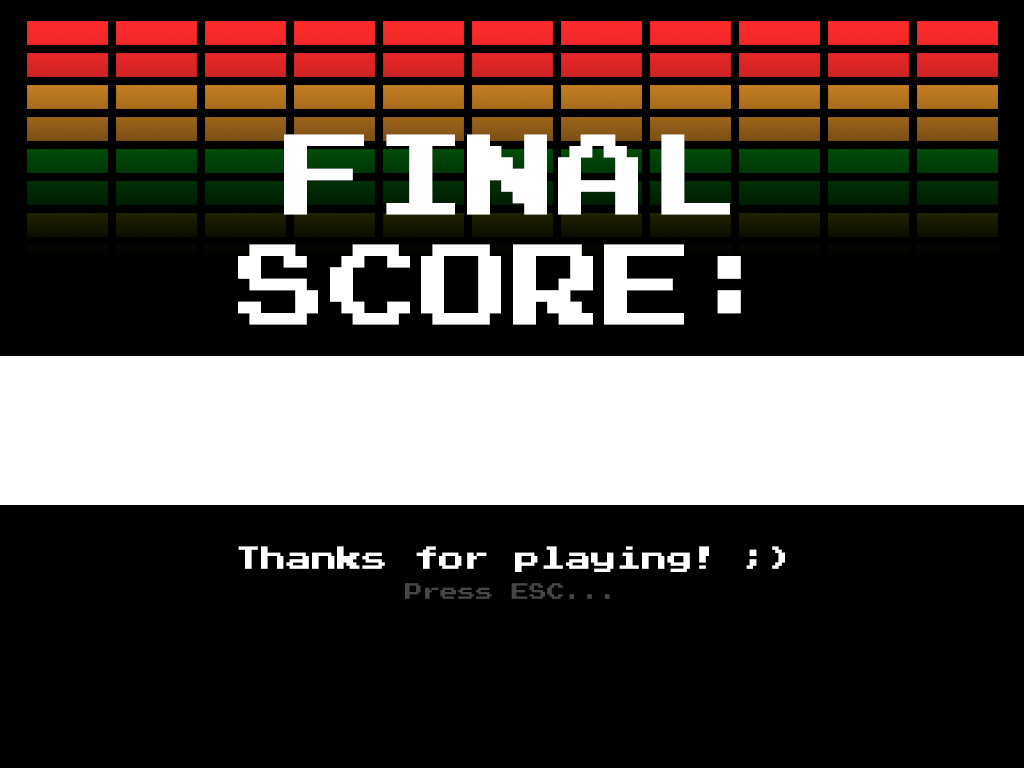
<style>
.page{position:relative;width:1024px;height:768px;background:#000000}
.page>*{position:absolute;margin:0}
.t1{font:91.4px "PressStart2P-Regular";color:#ffffff}
.t2{font:25.4px "PressStart2P-Regular";color:#ffffff}
.t3{font:17.8px "PressStart2P-Regular";color:#464646}
</style>
<div class="page">
<p class="t1" style="left:238px;top:134px;width:503px;height:191px;text-align:center">FINAL<br>SCORE:</p>
<p class="t2" style="left:238px;top:546px;width:547px;height:26px">Thanks for playing! ;)</p>
<p class="t3" style="left:405px;top:583px;width:205px;height:16px">Press ESC...</p>
</div>
